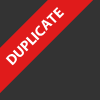
<style>
.page{position:relative;width:100px;height:100px;background:#333333}
.page>*{position:absolute;margin:0}
.t1{font:14.7px "MyriadPro-Bold";color:#ffffff}
</style>
<div class="page">
<p class="t1" style="left:5px;top:7px;width:60px;height:59px;rotate:-45deg">DUPLICATE</p>
</div>
